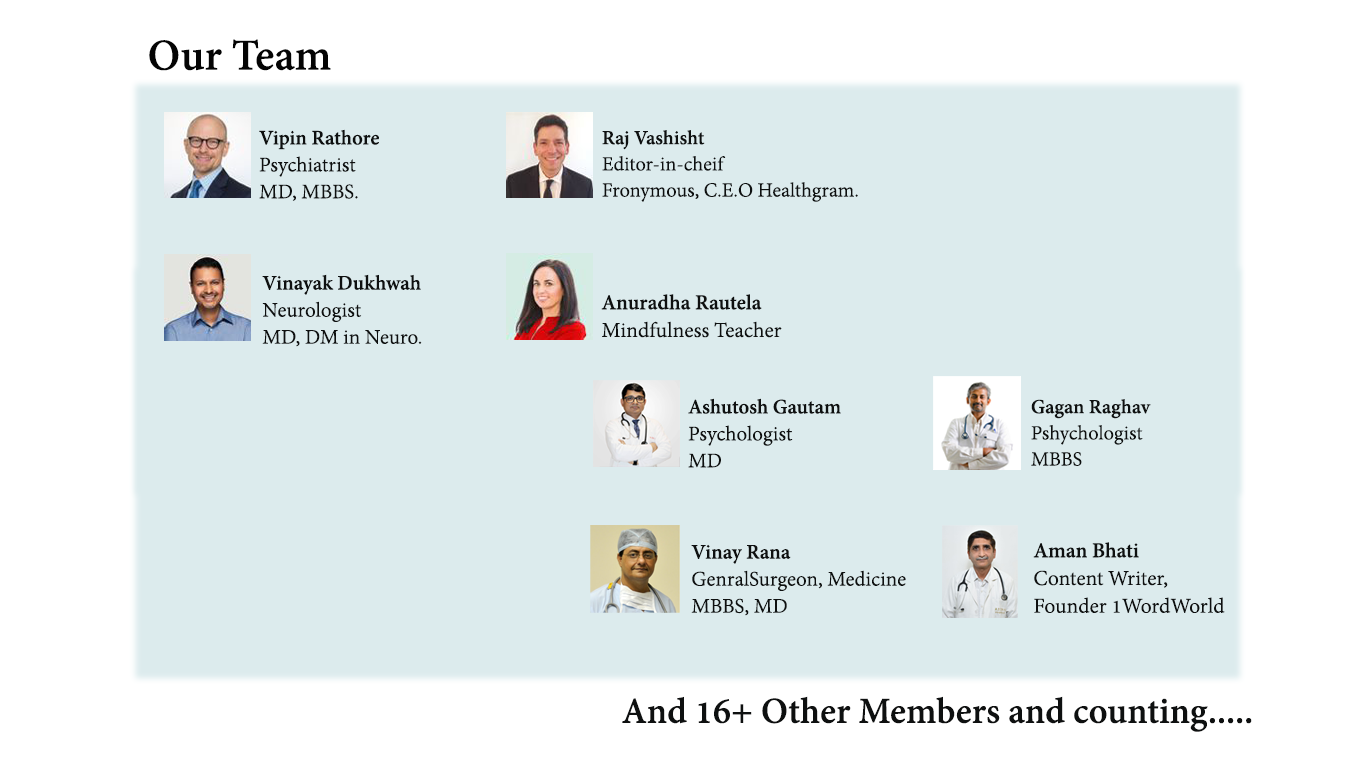
<style>
.page{position:relative;width:1366px;height:768px;background:#dcebed}
.page>*{position:absolute;margin:0}
.t1{font:48px "AdobeDevanagari-Bold";color:#040404}
.t2{font:22.4px "AdobeDevanagari-Regular";color:#0e1010}
.t3{font:22.4px "AdobeDevanagari-Bold";color:#0e1010}
.t4{font:21.8px "AdobeDevanagari-Regular";color:#0e1010}
.t5{font:21.8px "AdobeDevanagari-Bold";color:#0e1010}
.t6{font:22.6px "AdobeDevanagari-Regular";color:#0e1010}
.t7{font:22.6px "AdobeDevanagari-Bold";color:#0e1010}
.t8{font:23.1px "AdobeDevanagari-Regular";color:#0e1010}
.t9{font:23.1px "AdobeDevanagari-Bold";color:#0e1010}
.t10{font:39.8px "AdobeDevanagari-Bold";color:#0e1010}
</style>
<div class="page">
<p class="t1" style="left:149px;top:39px;width:182px;height:32px">Our Team</p>
<p class="t2" style="left:259px;top:129px;width:120px;height:72px"><span class="t3">Vipin Rathore<br></span>Psychiatrist<br>MD, MBBS.</p>
<p class="t4" style="left:602px;top:130px;width:256px;height:72px"><span class="t5">Raj Vashisht<br></span>Editor-in-cheif<br>Fronymous, C.E.O Healthgram.</p>
<p class="t6" style="left:262px;top:274px;width:160px;height:73px"><span class="t7">Vinayak Dukhwah<br></span>Neurologist<br>MD, DM in Neuro.</p>
<p class="t8" style="left:601px;top:294px;width:181px;height:44px"><span class="t9">Anuradha Rautela <br></span>Mindfulness Teacher</p>
<p class="t3" style="left:688px;top:398px;width:153px;height:70px">Ashutosh Gautam<br><span class="t2">Psychologist<br>MD</span></p>
<p class="t4" style="left:1031px;top:399px;width:120px;height:67px"><span class="t5">Gagan Raghav<br></span>Pshychologist<br>MBBS</p>
<p class="t6" style="left:691px;top:544px;width:215px;height:72px"><span class="t7">Vinay Rana<br></span>GenralSurgeon, Medicine<br>MBBS, MD</p>
<p class="t8" style="left:1033px;top:542px;width:192px;height:71px"><span class="t9">Aman Bhati <br></span>Content Writer, <br>Founder 1WordWorld</p>
<p class="t10" style="left:622px;top:696px;width:630px;height:36px">And 16+ Other Members and counting.....</p>
</div>
